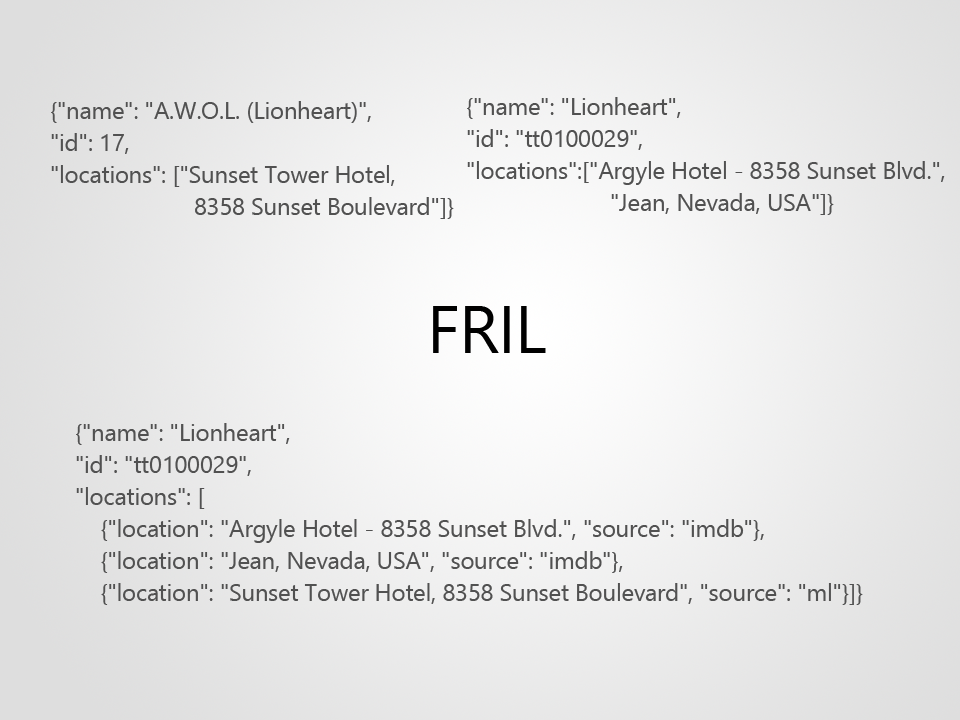
<style>
.page{position:relative;width:960px;height:720px}
.page>*{position:absolute;margin:0}
.t1{font:24px/32px "SegoeUI";letter-spacing:-0.01em;color:#515151}
.t2{font:66.7px "SegoeUI";letter-spacing:-0.01em;color:#000000}
</style>
<div class="page">
<p class="t1" style="left:51px;top:101px;width:403px;height:118px">{"name": "A.W.O.L. (Lionheart)",<br>"id": 17,<br>"locations": ["Sunset Tower Hotel,<br>    8358 Sunset Boulevard"]}</p>
<p class="t1" style="left:467px;top:97px;width:478px;height:118px">{"name": "Lionheart",<br>"id": "tt0100029",<br>"locations":["Argyle Hotel - 8358 Sunset Blvd.",<br>    "Jean, Nevada, USA"]}</p>
<p class="t2" style="left:433px;top:306px;width:113px;height:47px">FRIL</p>
<p class="t1" style="left:76px;top:423px;width:787px;height:182px">{"name": "Lionheart",<br>"id": "tt0100029",<br>"locations": [<br>    {"location": "Argyle Hotel - 8358 Sunset Blvd.", "source": "imdb"},<br>    {"location": "Jean, Nevada, USA", "source": "imdb"},<br>    {"location": "Sunset Tower Hotel, 8358 Sunset Boulevard", "source": "ml"}]}</p>
</div>
